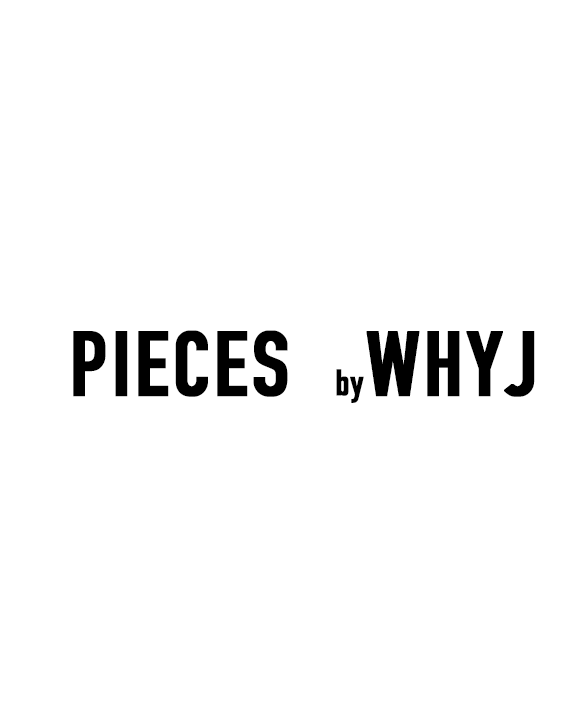
<style>
.page{position:relative;width:576px;height:720px;background:#ffffff}
.page>*{position:absolute;margin:0}
.t1{font:90px "DINCondensed-Bold";letter-spacing:0.025em;color:#000000;font-weight:bold}
.t2{font:36px "DINCondensed-Bold";letter-spacing:0.025em;color:#000000;font-weight:bold}
</style>
<div class="page">
<p class="t1" style="left:73px;top:330px;width:462px;height:73px">PIECES  <span class="t2">by</span>WHYJ</p>
</div>
